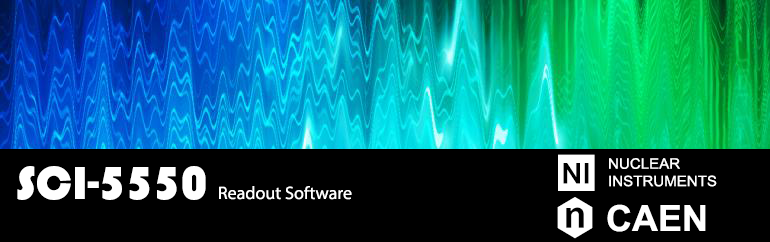
<style>
.page{position:relative;width:770px;height:242px;background:#000000}
.page>*{position:absolute;margin:0}
.t1{font:42.3px "NIFont";color:#ffffff}
.t2{font:14.5px "ArialMT";color:#ffffff;scale:1.04 1}
.t3{font:18px "MyriadPro-Regular";color:#ffffff}
.t4{font:48px "Bauhaus93";color:#ffffff}
.t5{font:44px "NIFont";color:#ffffff}
.t6{font:36px "Arial-BoldMT";color:#ffffff}
</style>
<div class="page">
<p class="t1" style="left:558px;top:154px;width:37px;height:37px">N</p>
<p class="t2" style="left:609px;top:158px;width:108px;height:29px">NUCLEAR<br>INSTRUMENTS</p>
<p class="t3" style="left:17px;top:166px;width:335px;height:34px"><span class="t4">SCI-5550    </span>Readout Software</p>
<p class="t5" style="left:557px;top:197px;width:36px;height:42px">C</p>
<p class="t6" style="left:607px;top:204px;width:99px;height:28px">CAEN</p>
</div>
